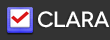
<style>
.page{position:relative;width:110px;height:40px;background:#333333}
.page>*{position:absolute;margin:0}
.t1{font:22px "Novecentowide-Medium";letter-spacing:-0.025em;color:#ffffff}
</style>
<div class="page">
<p class="t1" style="left:38px;top:11px;width:72px;height:17px">CLARA</p>
</div>
